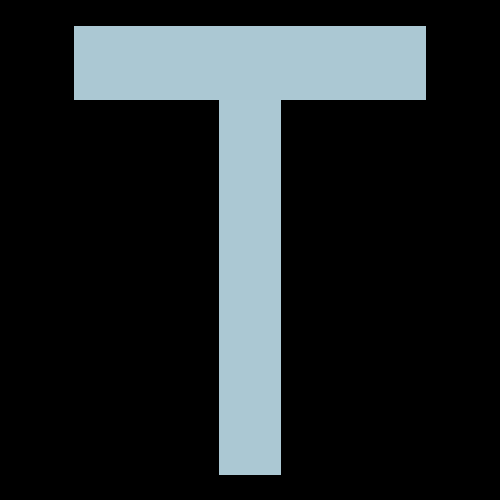
<style>
.page{position:relative;width:500px;height:500px;background:#000000}
.page>*{position:absolute;margin:0}
.t1{font:625px "Lato-Regular";color:#abc8d3}
</style>
<div class="page">
<p class="t1" style="left:74px;top:26px;width:352px;height:449px">T</p>
</div>
